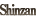
<style>
.page{position:relative;width:36px;height:18px;background:#ffffff}
.page>*{position:absolute;margin:0}
.t1{font:14px "RyuminPro-ExBold";letter-spacing:-0.12em;color:#4a3f32;font-weight:bold;scale:0.8 1}
</style>
<div class="page">
<p class="t1" style="left:0px;top:4px;width:37px;height:12px">Shinzan</p>
</div>
